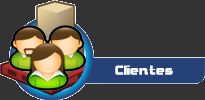
<style>
.page{position:relative;width:205px;height:100px;background:#333333}
.page>*{position:absolute;margin:0}
.t1{font:14px "BolsterBold";color:#ffffff}
</style>
<div class="page">
<p class="t1" style="left:115px;top:65px;width:58px;height:10px">Clientes</p>
</div>
